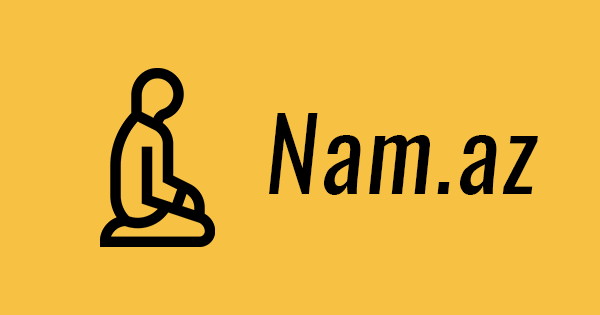
<style>
.page{position:relative;width:600px;height:315px;background:#f7c244}
.page>*{position:absolute;margin:0}
.t1{font:100px "Oswald-RegularItalic";letter-spacing:0.03em;color:#000000}
</style>
<div class="page">
<p class="t1" style="left:269px;top:113px;width:269px;height:82px">Nam.az</p>
</div>
